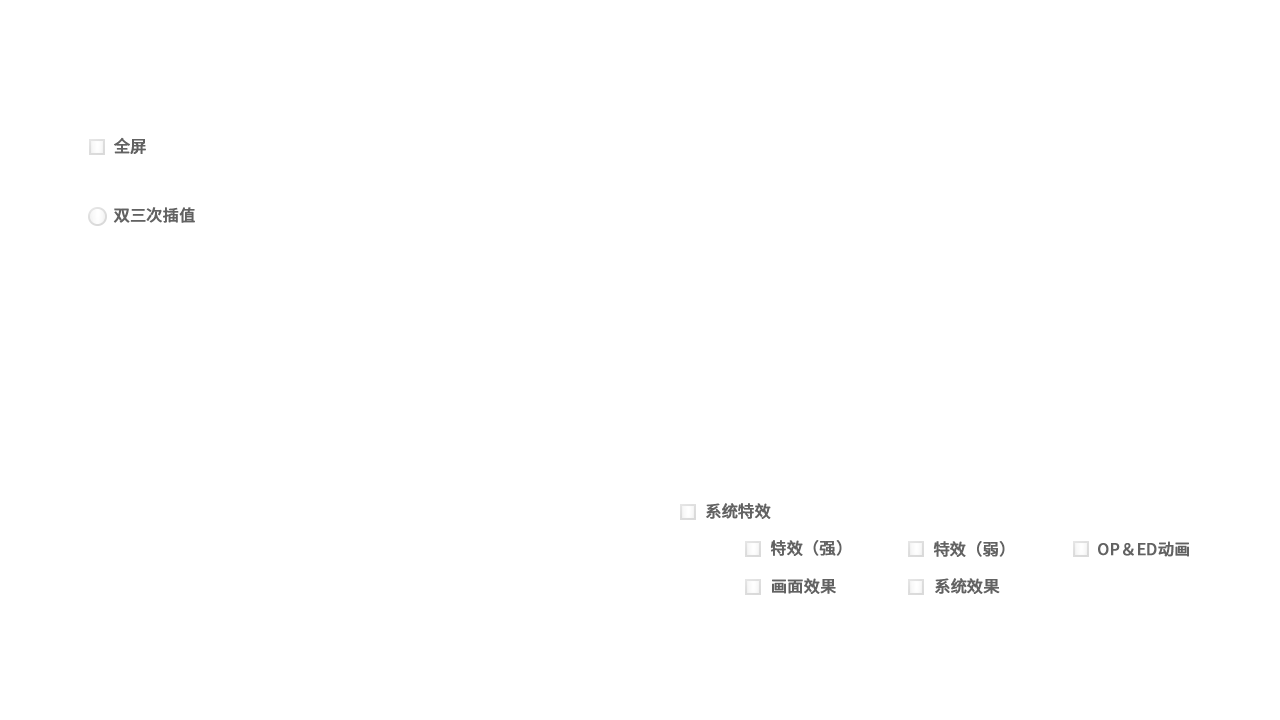
<style>
.page{position:relative;width:1280px;height:720px;background:#ffffff}
.page>*{position:absolute;margin:0}
.t1{font:16px "SourceHanSansSC-Regular";color:#626262;font-weight:bold}
</style>
<div class="page">
<p class="t1" style="left:114px;top:137px;width:32px;height:17px">全屏</p>
<p class="t1" style="left:113px;top:207px;width:82px;height:16px">双三次插值</p>
<p class="t1" style="left:706px;top:503px;width:65px;height:16px">系统特效</p>
<p class="t1" style="left:770px;top:540px;width:72px;height:16px">特效（强）</p>
<p class="t1" style="left:933px;top:541px;width:72px;height:16px">特效（弱）</p>
<p class="t1" style="left:1098px;top:541px;width:91px;height:16px">OP＆ED动画</p>
<p class="t1" style="left:772px;top:578px;width:64px;height:16px">画面效果</p>
<p class="t1" style="left:935px;top:578px;width:65px;height:16px">系统效果</p>
</div>
